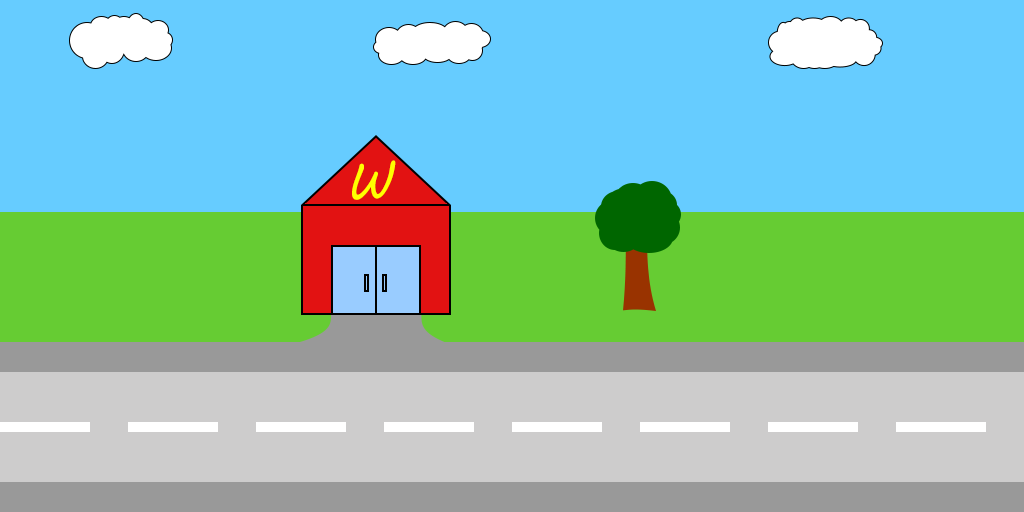
<style>
.page{position:relative;width:1024px;height:512px;background:#66ccff}
.page>*{position:absolute;margin:0}
.t1{font:49px "MVBoli";color:#ffff00}
</style>
<div class="page">
<p class="t1" style="left:352px;top:160px;width:44px;height:40px">W</p>
</div>
